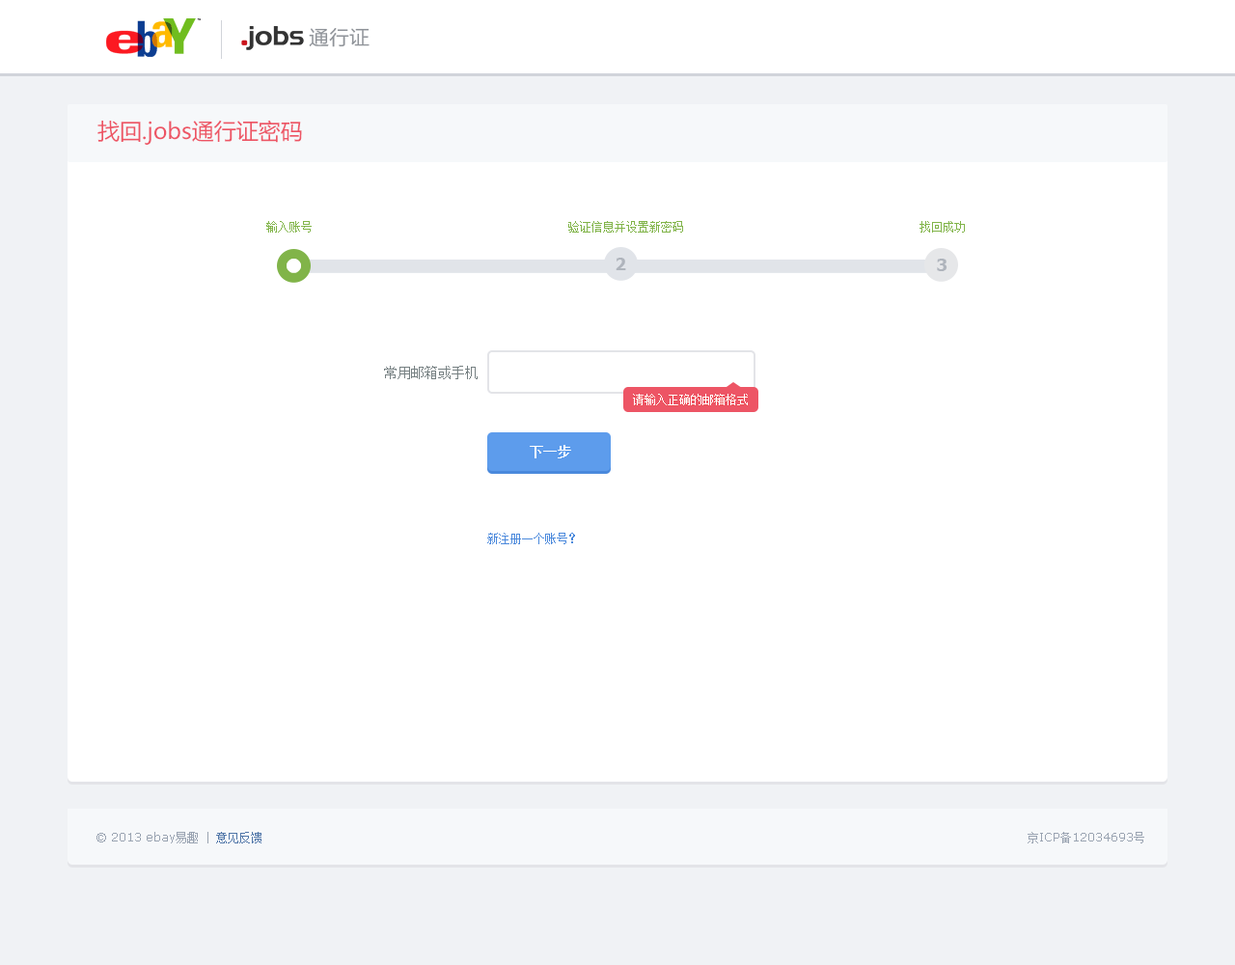
<style>
.page{position:relative;width:1235px;height:965px;background:#ffffff}
.page>*{position:absolute;margin:0}
.t1{font:20.3px "FZLTHJW--GB1-0";color:#8f9399}
.t2{font:22.2px "MicrosoftYaHei";color:#ed5565}
.t3{font:11.6px "SimSun";color:#81b449}
.t4{font:17.3px "Tahoma-Bold";color:#afb4bc}
.t5{font:13.5px "SimSun";color:#768082}
.t6{font:11.6px "SimSun";color:#ffffff}
.t7{font:13.5px "SimSun";color:#ffffff;text-transform:uppercase;font-weight:bold}
.t8{font:11.6px "SimSun";color:#4b89dc}
.t9{font:11.6px "Verdana";color:#99a3b1}
.t10{font:11.6px "SimSun";color:#99a3b1}
.t11{font:11.6px "SimSun";color:#5076a8}
</style>
<div class="page">
<p class="t1" style="left:309px;top:28px;width:61px;height:19px">通行证</p>
<p class="t2" style="left:97px;top:120px;width:205px;height:25px">找回.jobs通行证密码</p>
<p class="t3" style="left:266px;top:221px;width:46px;height:12px">输入账号</p>
<p class="t3" style="left:568px;top:221px;width:115px;height:12px">验证信息并设置新密码</p>
<p class="t3" style="left:920px;top:221px;width:45px;height:12px">找回成功</p>
<p class="t4" style="left:616px;top:258px;width:10px;height:12px">2</p>
<p class="t4" style="left:937px;top:259px;width:11px;height:12px">3</p>
<p class="t5" style="left:384px;top:366px;width:94px;height:13px">常用邮箱或手机</p>
<p class="t6" style="left:633px;top:394px;width:115px;height:11px">请输入正确的邮箱格式</p>
<p class="t7" style="left:530px;top:445px;width:41px;height:13px">下一步</p>
<p class="t8" style="left:487px;top:533px;width:88px;height:11px">新注册一个账号？</p>
<p class="t9" style="left:97px;top:832px;width:165px;height:12px">© 2013 ebay<span class="t10">易趣</span><span class="t10"> | </span><span class="t11">意见反馈</span></p>
<p class="t9" style="left:1028px;top:832px;width:117px;height:12px"><span class="t10">京</span>ICP<span class="t10">备</span>12034693<span class="t10">号</span></p>
</div>
